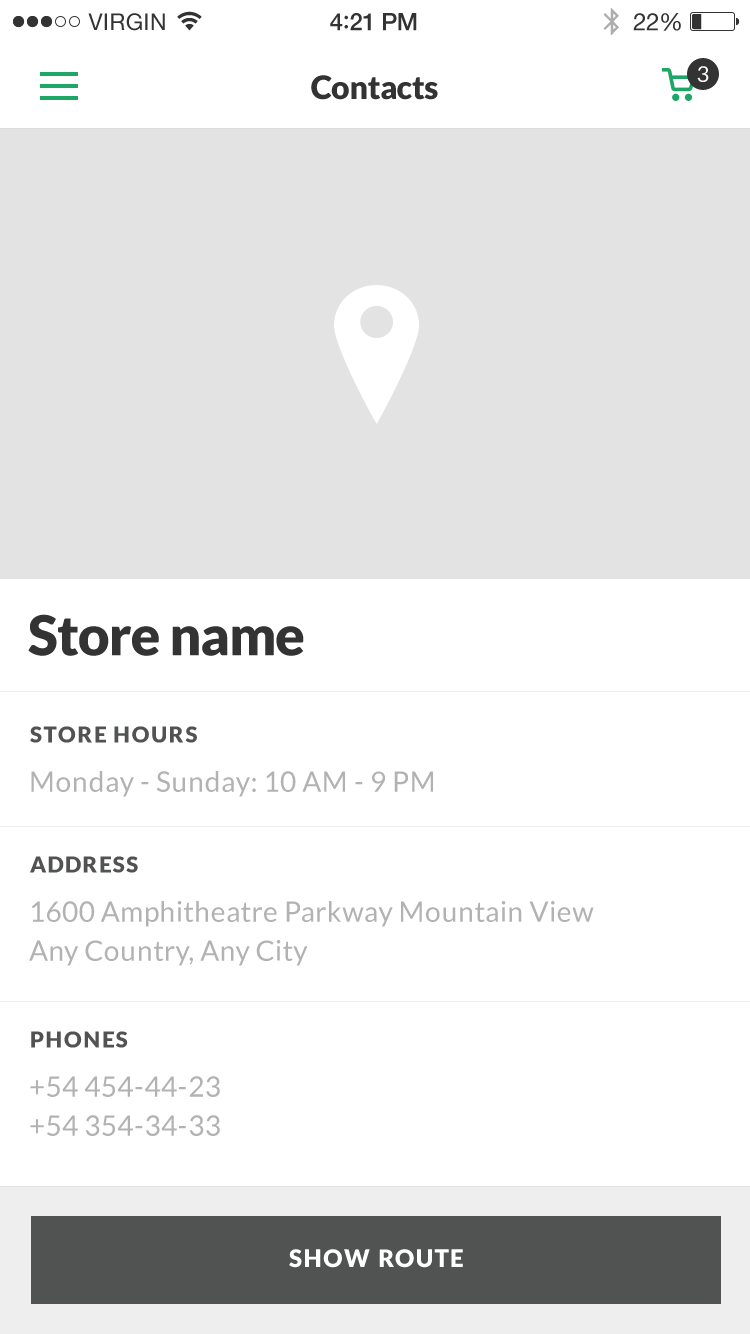
<style>
.page{position:relative;width:750px;height:1334px;background:#ffffff}
.page>*{position:absolute;margin:0}
.t1{font:32px "Lato-Black";letter-spacing:-0.02em;color:#333333}
.t2{font:22px "Lato-Regular";letter-spacing:0.02em;color:#ffffff}
.t3{font:55px "Lato-Black";letter-spacing:-0.02em;color:#333333}
.t4{font:22px "Lato-Black";letter-spacing:0.07em;color:#515252}
.t5{font:28px "Lato-Regular";letter-spacing:0.02em;color:#b2b2b2}
.t6{font:28px/39.2px "Lato-Regular";letter-spacing:0.02em;color:#b2b2b2}
.t7{font:24px "Lato-Black";letter-spacing:0.07em;color:#ffffff}
</style>
<div class="page">
<p class="t1" style="left:311px;top:75px;width:127px;height:25px">Contacts</p>
<p class="t2" style="left:697px;top:66px;width:12px;height:16px">3</p>
<p class="t3" style="left:28px;top:614px;width:276px;height:42px">Store name</p>
<p class="t4" style="left:30px;top:726px;width:167px;height:17px">STORE HOURS</p>
<p class="t5" style="left:31px;top:771px;width:402px;height:26px">Monday - Sunday: 10 AM - 9 PM</p>
<p class="t4" style="left:30px;top:856px;width:108px;height:17px">ADDRESS</p>
<p class="t6" style="left:29px;top:901px;width:565px;height:65px">1600 Amphitheatre Parkway Mountain View<br>Any Country, Any City</p>
<p class="t4" style="left:31px;top:1031px;width:97px;height:17px">PHONES</p>
<p class="t6" style="left:30px;top:1076px;width:190px;height:60px">+54 454-44-23<br>+54 354-34-33</p>
<p class="t7" style="left:289px;top:1249px;width:174px;height:19px">SHOW ROUTE</p>
</div>
